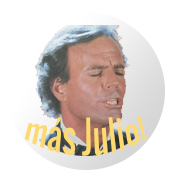
<style>
.page{position:relative;width:180px;height:180px;background:#ffffff}
.page>*{position:absolute;margin:0}
.t1{font:24.5px "Oswald";letter-spacing:0.01em;color:#fdda70;scale:1.29 1}
</style>
<div class="page">
<p class="t1" style="left:24px;top:116px;width:123px;height:40px">más Julio!</p>
</div>
